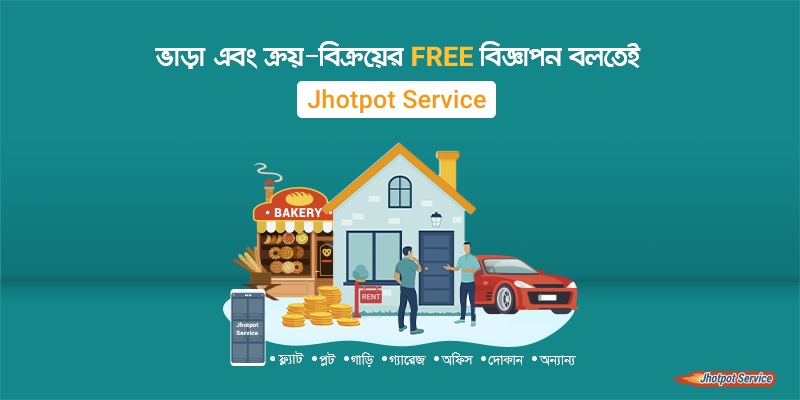
<style>
.page{position:relative;width:800px;height:400px;background:#14878b}
.page>*{position:absolute;margin:0}
.t1{font:32.6px "KongshoMJ-Bold";color:#ffffff}
.t2{font:27.2px "Roboto-Bold";color:#fec22e}
.t3{font:25.5px "Roboto-Medium";color:#f79a0f}
.t4{font:6.4px "Roboto-Bold";color:#ffffff}
.t5{font:16px "SutonnyMJ-Regular";color:#ffffff}
</style>
<div class="page">
<p class="t1" style="left:155px;top:41px;width:486px;height:28px">fvov Ges µq-weµ‡qi <span class="t2">FREE </span>weÁvcb ej‡ZB</p>
<p class="t3" style="left:307px;top:89px;width:179px;height:24px">Jhotpot Service</p>
<p class="t4" style="left:236px;top:322px;width:23px;height:13px">Jhotpot<br>Service</p>
<p class="t5" style="left:278px;top:351px;width:26px;height:14px">d¬¨vU</p>
<p class="t5" style="left:319px;top:352px;width:17px;height:14px">cøU</p>
<p class="t5" style="left:351px;top:352px;width:23px;height:15px">Mvwo</p>
<p class="t5" style="left:441px;top:352px;width:32px;height:14px">Awdm</p>
<p class="t5" style="left:389px;top:355px;width:37px;height:10px">M¨v‡iR</p>
<p class="t5" style="left:488px;top:355px;width:36px;height:11px">†`vKvb</p>
<p class="t5" style="left:539px;top:355px;width:37px;height:11px">Ab¨vb¨</p>
</div>
